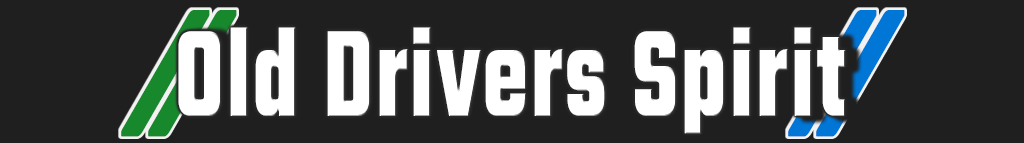
<style>
.page{position:relative;width:1024px;height:143px;background:#1f1f1f}
.page>*{position:absolute;margin:0}
.t1{font:183.9px "Sneakout";letter-spacing:-0.54em;font-weight:bold;scale:0.48 1}
.t2{font:132px "Teko-Bold";letter-spacing:0.025em;color:#ffffff;font-weight:bold;scale:0.73 1}
</style>
<div class="page">
<p class="t1" style="left:788px;top:10px;width:117px;height:127px">//</p>
<p class="t2" style="left:178px;top:27px;width:668px;height:107px">Old Drivers Spirit</p>
</div>
